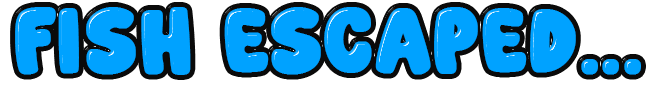
<style>
.page{position:relative;width:651px;height:93px;background:#00a2ff}
.page>*{position:absolute;margin:0}
.t1{font:100px "SuperLobster";color:#00a2ff;font-weight:bold}
</style>
<div class="page">
<p class="t1" style="left:15px;top:7px;width:626px;height:68px">FISH ESCAPED...</p>
</div>
